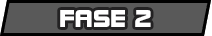
<style>
.page{position:relative;width:212px;height:36px;background:#595959}
.page>*{position:absolute;margin:0}
.t1{font:26.7px "DFSoGeiStd-W9";color:#ffffff;scale:0.9 1}
</style>
<div class="page">
<p class="t1" style="left:60px;top:10px;width:91px;height:17px">FASE 2</p>
</div>
